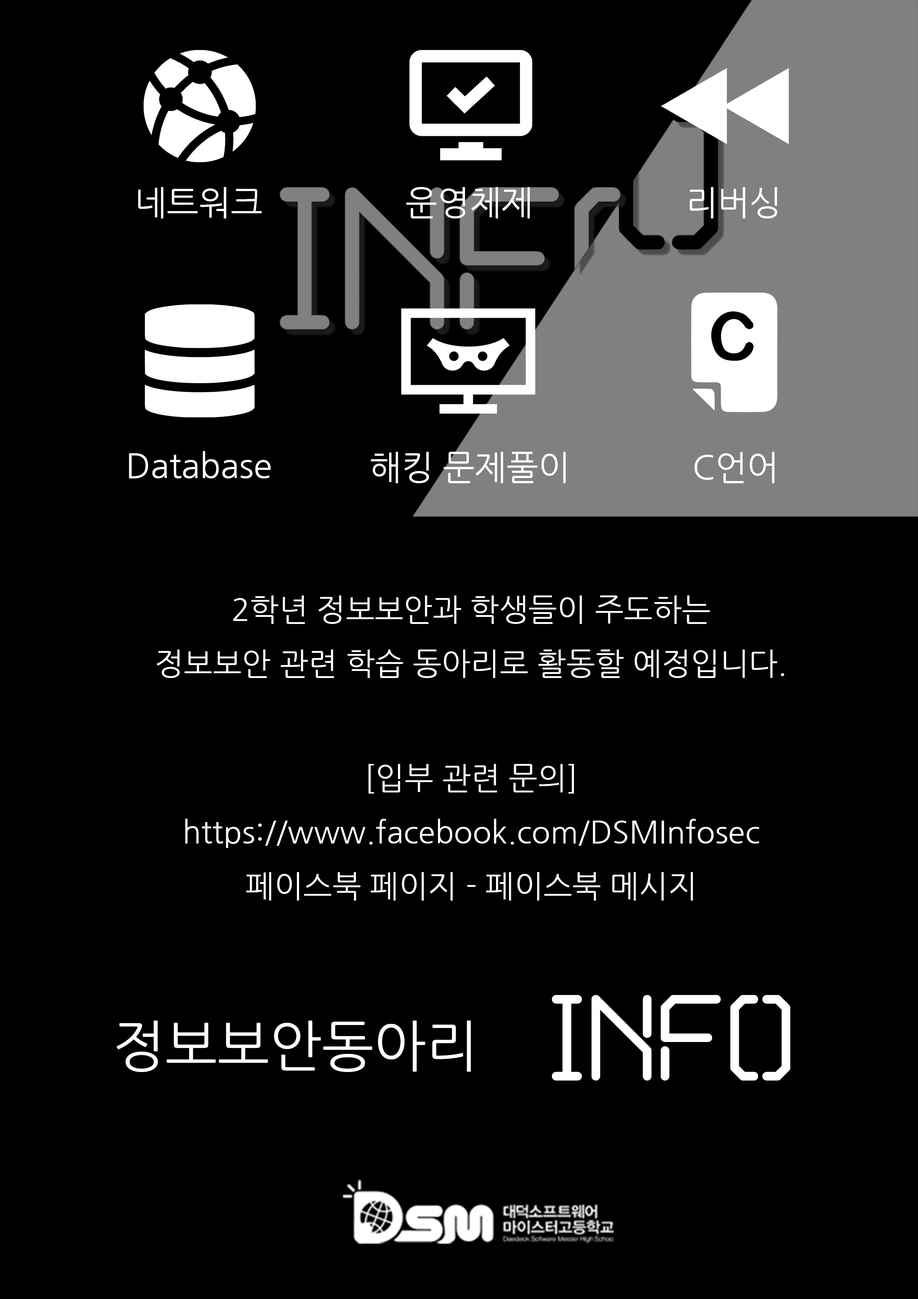
<style>
.page{position:relative;width:918px;height:1299px;background:#000000}
.page>*{position:absolute;margin:0}
.t1{font:33.9px "NanumGothic";color:#ffffff}
.t2{font:30.9px "NanumGothic";color:#ffffff}
.t3{font:138.8px "Marske";color:#ffffff}
.t4{font:55.5px "NanumGothic";color:#ffffff}
</style>
<div class="page">
<p class="t1" style="left:138px;top:187px;width:124px;height:31px">네트워크</p>
<p class="t1" style="left:406px;top:187px;width:124px;height:31px">운영체제</p>
<p class="t1" style="left:690px;top:187px;width:87px;height:31px">리버싱</p>
<p class="t1" style="left:129px;top:451px;width:142px;height:27px">Database</p>
<p class="t1" style="left:371px;top:452px;width:195px;height:31px">해킹 문제풀이</p>
<p class="t1" style="left:695px;top:452px;width:80px;height:31px">C언어</p>
<p class="t2" style="left:157px;top:595px;width:627px;height:83px;text-align:center">2학년 정보보안과 학생들이 주도하는<br>정보보안 관련 학습 동아리로 활동할 예정입니다.</p>
<p class="t2" style="left:185px;top:764px;width:574px;height:136px;text-align:center">[입부 관련 문의]<br>https://www.facebook.com/DSMInfosec<br>페이스북 페이지 - 페이스북 메시지</p>
<p class="t3" style="left:552px;top:995px;width:238px;height:85px">info</p>
<p class="t4" style="left:117px;top:1020px;width:354px;height:52px">정보보안동아리</p>
</div>
